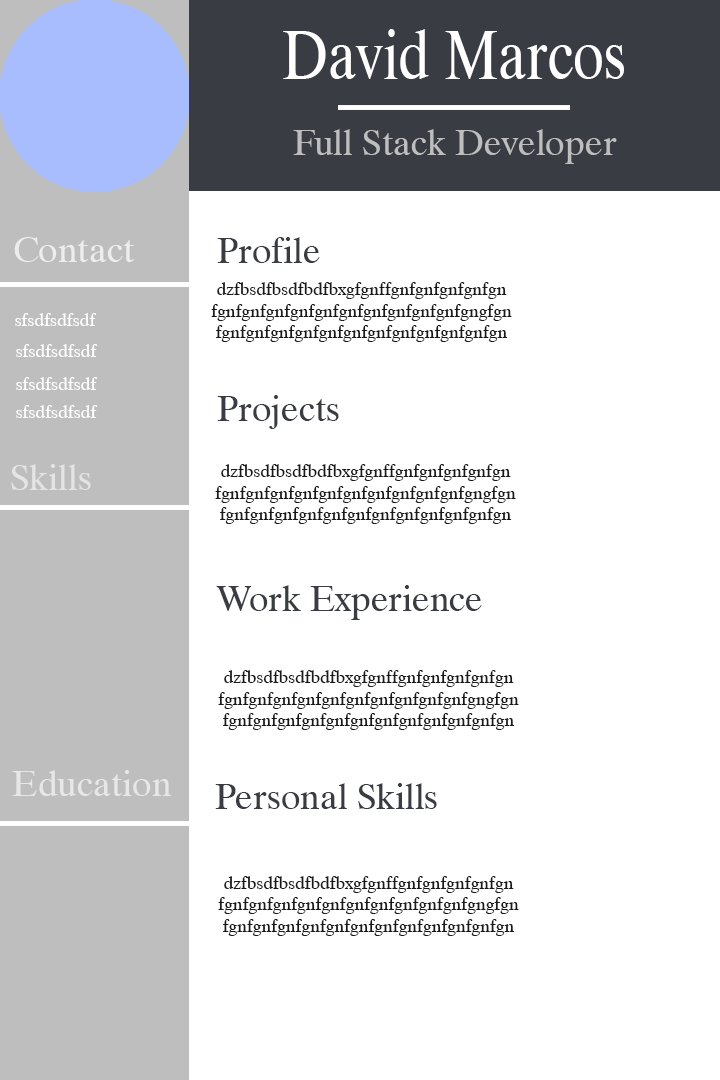
<style>
.page{position:relative;width:720px;height:1080px;background:#ffffff}
.page>*{position:absolute;margin:0}
.t1{font:69.8px "Dutch801BT-Roman";color:#ffffff;scale:0.82 1}
.t2{font:36px "Dutch801BT-Roman";color:#bebebe}
.t3{font:36px "Dutch801BT-Roman";color:#ededed}
.t4{font:36px "Dutch801BT-Roman";color:#3a3c44}
.t5{font:18px "Dutch801BT-Roman";color:#191919}
.t6{font:18px "Dutch801BT-Roman";color:#ffffff}
.t7{font:36px "Dutch801BT-Roman";color:#e5e3e3}
.t8{font:36px "Dutch801BT-Roman";color:#e7e7e7}
</style>
<div class="page">
<p class="t1" style="left:283px;top:29px;width:341px;height:50px">David Marcos</p>
<p class="t2" style="left:293px;top:129px;width:324px;height:35px">Full Stack Developer</p>
<p class="t3" style="left:14px;top:237px;width:121px;height:25px">Contact</p>
<p class="t4" style="left:217px;top:237px;width:103px;height:26px">Profile</p>
<p class="t5" style="left:211px;top:282px;width:301px;height:60px;text-align:center">dzfbsdfbsdfbdfbxgfgnffgnfgnfgnfgnfgn<br>fgnfgnfgnfgnfgnfgnfgnfgnfgnfgnfgngfgn<br>fgnfgnfgnfgnfgnfgnfgnfgnfgnfgnfgnfgn</p>
<p class="t6" style="left:15px;top:313px;width:82px;height:13px">sfsdfsdfsdf</p>
<p class="t6" style="left:16px;top:344px;width:82px;height:13px">sfsdfsdfsdf</p>
<p class="t6" style="left:16px;top:377px;width:82px;height:13px">sfsdfsdfsdf</p>
<p class="t4" style="left:217px;top:395px;width:122px;height:34px">Projects</p>
<p class="t6" style="left:16px;top:405px;width:82px;height:13px">sfsdfsdfsdf</p>
<p class="t7" style="left:11px;top:464px;width:80px;height:26px">Skills</p>
<p class="t5" style="left:215px;top:464px;width:301px;height:60px;text-align:center">dzfbsdfbsdfbdfbxgfgnffgnfgnfgnfgnfgn<br>fgnfgnfgnfgnfgnfgnfgnfgnfgnfgnfgngfgn<br>fgnfgnfgnfgnfgnfgnfgnfgnfgnfgnfgnfgn</p>
<p class="t4" style="left:216px;top:585px;width:266px;height:35px">Work Experience</p>
<p class="t5" style="left:218px;top:670px;width:301px;height:60px;text-align:center">dzfbsdfbsdfbdfbxgfgnffgnfgnfgnfgnfgn<br>fgnfgnfgnfgnfgnfgnfgnfgnfgnfgnfgngfgn<br>fgnfgnfgnfgnfgnfgnfgnfgnfgnfgnfgnfgn</p>
<p class="t8" style="left:12px;top:770px;width:159px;height:26px">Education</p>
<p class="t4" style="left:215px;top:783px;width:222px;height:26px">Personal Skills</p>
<p class="t5" style="left:218px;top:876px;width:301px;height:60px;text-align:center">dzfbsdfbsdfbdfbxgfgnffgnfgnfgnfgnfgn<br>fgnfgnfgnfgnfgnfgnfgnfgnfgnfgnfgngfgn<br>fgnfgnfgnfgnfgnfgnfgnfgnfgnfgnfgnfgn</p>
</div>
